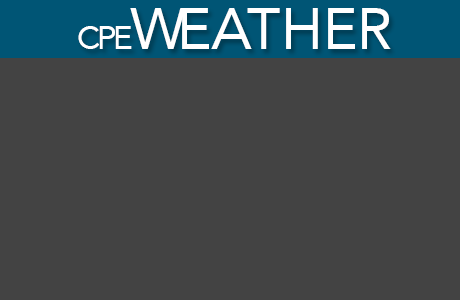
<style>
.page{position:relative;width:460px;height:300px;background:#434343}
.page>*{position:absolute;margin:0}
.t1{font:58.3px "Avenir-Roman";color:#ffffff}
.t2{font:58.3px "Avenir-Roman";letter-spacing:-0.16em;color:#ffffff}
.t3{font:33.3px "Avenir-Roman";letter-spacing:-0.1em;color:#ffffff}
</style>
<div class="page">
<p class="t1" style="left:130px;top:8px;width:261px;height:41px"><span class="t2"> W</span>EATHER</p>
<p class="t3" style="left:78px;top:26px;width:54px;height:23px">CPE</p>
</div>
